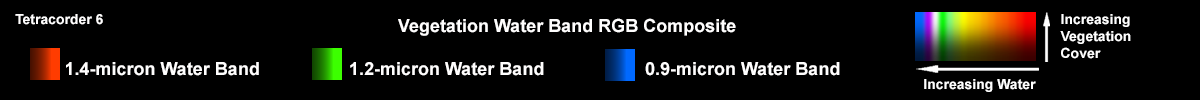
<style>
.page{position:relative;width:1200px;height:100px;background:#000000}
.page>*{position:absolute;margin:0}
.t1{font:14px "Arial-BoldMT";color:#fffefe}
.t2{font:14px "Arial-BoldMT";color:#ffffff}
.t3{font:18px "Arial-BoldMT";color:#fffefe}
</style>
<div class="page">
<p class="t1" style="left:15px;top:14px;width:88px;height:11px">Tetracorder 6</p>
<p class="t2" style="left:1060px;top:14px;width:71px;height:45px">Increasing <br>Vegetation<br>Cover</p>
<p class="t3" style="left:398px;top:18px;width:338px;height:18px">Vegetation Water Band RGB Composite</p>
<p class="t3" style="left:65px;top:62px;width:194px;height:14px">1.4-micron Water Band</p>
<p class="t3" style="left:350px;top:62px;width:194px;height:14px">1.2-micron Water Band</p>
<p class="t3" style="left:645px;top:62px;width:195px;height:14px">0.9-micron Water Band</p>
<p class="t2" style="left:924px;top:79px;width:112px;height:13px">Increasing Water</p>
</div>
